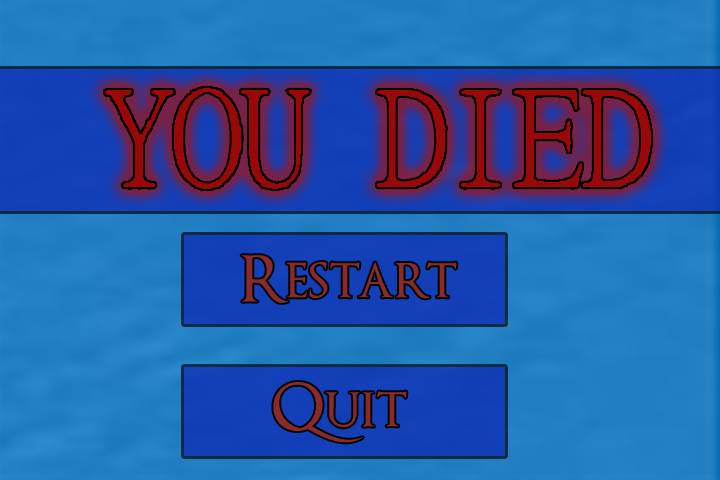
<style>
.page{position:relative;width:720px;height:480px}
.page>*{position:absolute;margin:0}
.t1{font:62.8px "OptimusPrinceps";color:#892b2b}
</style>
<div class="page">
<p class="t1" style="left:241px;top:255px;width:216px;height:48px">Restart</p>
<p class="t1" style="left:273px;top:382px;width:134px;height:61px">Quit</p>
</div>
